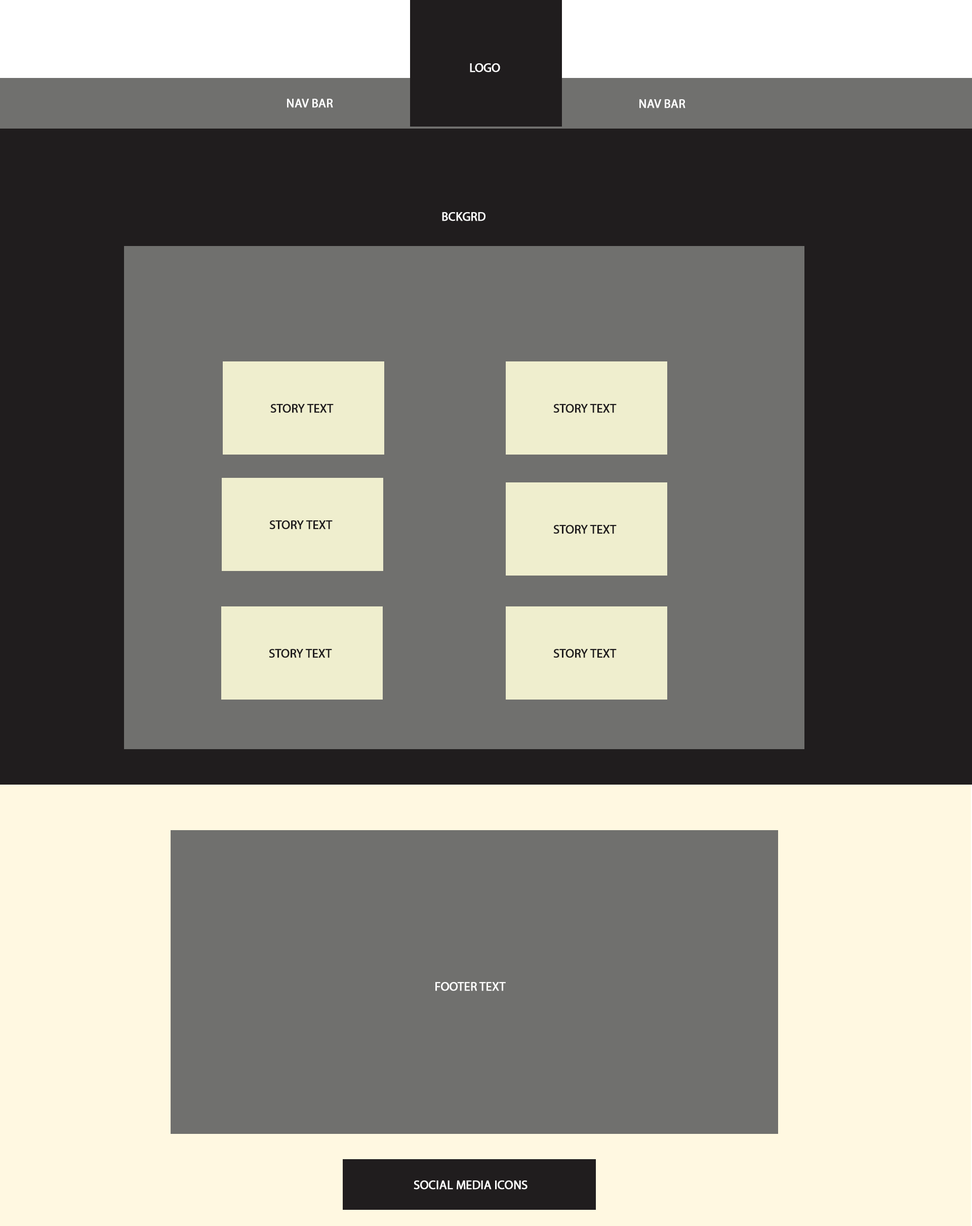
<style>
.page{position:relative;width:972px;height:1226px;background:#70706e}
.page>*{position:absolute;margin:0}
.t1{font:12.2px "MyriadPro-Regular";letter-spacing:-0.003em;color:#ffffff;font-weight:bold}
.t2{font:12.2px "MyriadPro-Regular";letter-spacing:-0.003em;color:#fefefe;font-weight:bold}
.t3{font:12.2px "MyriadPro-Regular";letter-spacing:-0.003em;color:#201d1e;font-weight:bold}
</style>
<div class="page">
<p class="t1" style="left:470px;top:63px;width:30px;height:9px">LOGO</p>
<p class="t2" style="left:287px;top:99px;width:46px;height:9px">NAV BAR</p>
<p class="t2" style="left:640px;top:99px;width:46px;height:9px">NAV BAR</p>
<p class="t2" style="left:442px;top:212px;width:44px;height:9px">BCKGRD</p>
<p class="t3" style="left:270px;top:404px;width:64px;height:9px">STORY TEXT</p>
<p class="t3" style="left:553px;top:404px;width:64px;height:9px">STORY TEXT</p>
<p class="t3" style="left:269px;top:521px;width:64px;height:9px">STORY TEXT</p>
<p class="t3" style="left:553px;top:525px;width:64px;height:9px">STORY TEXT</p>
<p class="t3" style="left:269px;top:649px;width:63px;height:9px">STORY TEXT</p>
<p class="t3" style="left:553px;top:649px;width:64px;height:9px">STORY TEXT</p>
<p class="t1" style="left:435px;top:982px;width:71px;height:9px">FOOTER TEXT</p>
<p class="t1" style="left:414px;top:1181px;width:114px;height:9px">SOCIAL MEDIA ICONS</p>
</div>
